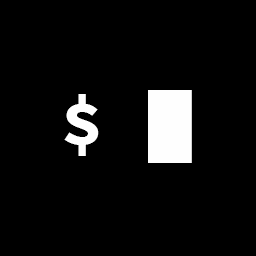
<style>
.page{position:relative;width:256px;height:256px;background:#000000}
.page>*{position:absolute;margin:0}
.t1{font:73.2px "SourceCodePro-Bold";color:#fefefe}
</style>
<div class="page">
<p class="t1" style="left:64px;top:90px;width:128px;height:73px">$ █</p>
</div>
